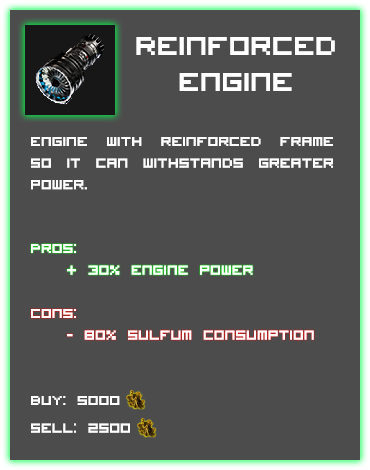
<style>
.page{position:relative;width:370px;height:470px;background:#4c4c4c}
.page>*{position:absolute;margin:0}
.t1{font:36px/12px "VisitorTT1BRK";color:#ffffff}
.t2{font:18px "VisitorTT1BRK";color:#ffffff}
</style>
<div class="page">
<p class="t1" style="left:136px;top:37px;width:199px;height:54px;text-align:center">Reinforced <br><br><br>Engine</p>
<p class="t2" style="left:31px;top:137px;width:302px;height:53px;text-align:justify">engine with reinforced frame so it can withstands greater power.</p>
<p class="t2" style="left:31px;top:244px;width:222px;height:31px;text-align:justify">Pros:<br> + 30% engine power</p>
<p class="t2" style="left:31px;top:309px;width:283px;height:31px;text-align:justify">Cons:<br> - 80% sulfum consumption</p>
<p class="t2" style="left:31px;top:396px;width:99px;height:37px">Buy: 5000 <br><br>Sell: 2500</p>
</div>
